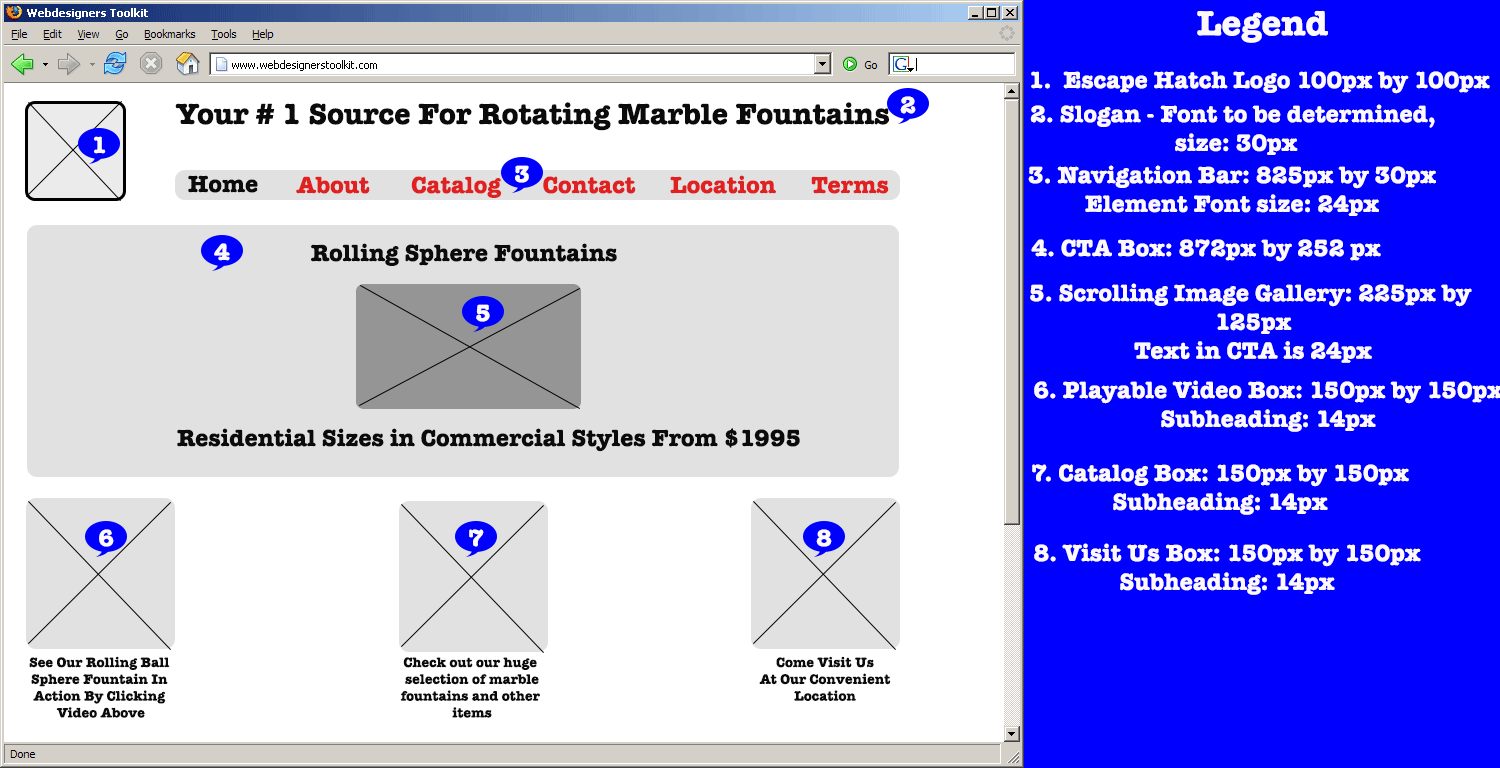
<style>
.page{position:relative;width:1500px;height:768px;background:#ffffff}
.page>*{position:absolute;margin:0}
.t1{font:36px "AmericanTypewriter-Bold";color:#fef9f9}
.t2{font:24px "AmericanTypewriter-Bold";color:#fef9f9}
.t3{font:30px "AmericanTypewriter-Bold";color:#0c0b0b}
.t4{font:24px "AmericanTypewriter-Bold";color:#0c0b0b}
.t5{font:24px "AmericanTypewriter-Bold";color:#e02121}
.t6{font:14px "AmericanTypewriter-Bold";color:#0c0b0b}
</style>
<div class="page">
<p class="t1" style="left:1197px;top:10px;width:131px;height:33px">Legend</p>
<p class="t2" style="left:1031px;top:71px;width:459px;height:23px">1.  Escape Hatch Logo 100px by 100px</p>
<p class="t3" style="left:175px;top:102px;width:715px;height:29px">Your # 1 Source For Rotating Marble Fountains</p>
<p class="t2" style="left:900px;top:96px;width:16px;height:18px">2</p>
<p class="t2" style="left:1030px;top:104px;width:405px;height:51px;text-align:center">2. Slogan - Font to be determined, <br>size: 30px</p>
<p class="t2" style="left:94px;top:136px;width:12px;height:18px">1</p>
<p class="t2" style="left:515px;top:165px;width:14px;height:18px">3</p>
<p class="t2" style="left:1028px;top:165px;width:408px;height:51px;text-align:center">3. Navigation Bar: 825px by 30px<br>Element Font size: 24px</p>
<p class="t4" style="left:188px;top:175px;width:70px;height:18px">Home</p>
<p class="t5" style="left:296px;top:176px;width:74px;height:18px">About</p>
<p class="t5" style="left:411px;top:176px;width:90px;height:22px">Catalog</p>
<p class="t5" style="left:543px;top:176px;width:93px;height:18px">Contact</p>
<p class="t5" style="left:670px;top:175px;width:106px;height:19px">Location</p>
<p class="t5" style="left:811px;top:176px;width:78px;height:18px">Terms</p>
<p class="t2" style="left:214px;top:243px;width:16px;height:18px">4</p>
<p class="t4" style="left:311px;top:243px;width:306px;height:23px">Rolling Sphere Fountains</p>
<p class="t2" style="left:1031px;top:239px;width:350px;height:23px">4. CTA Box: 872px by 252 px</p>
<p class="t2" style="left:1030px;top:283px;width:442px;height:80px;text-align:center">5. Scrolling Image Gallery: 225px by <br>125px<br>Text in CTA is 24px</p>
<p class="t2" style="left:476px;top:304px;width:14px;height:18px">5</p>
<p class="t4" style="left:177px;top:428px;width:623px;height:24px">Residential Sizes in Commercial Styles From $1995</p>
<p class="t2" style="left:1032px;top:464px;width:377px;height:51px;text-align:center">7. Catalog Box: 150px by 150px<br>Subheading: 14px</p>
<p class="t2" style="left:99px;top:529px;width:15px;height:18px">6</p>
<p class="t2" style="left:469px;top:529px;width:15px;height:18px">7</p>
<p class="t2" style="left:816px;top:529px;width:16px;height:18px">8</p>
<p class="t2" style="left:1034px;top:543px;width:387px;height:52px;text-align:center">8. Visit Us Box: 150px by 150px<br>Subheading: 14px</p>
<p class="t6" style="left:29px;top:656px;width:141px;height:62px;text-align:center">See Our Rolling Ball <br>Sphere Fountain In <br>Action By Clicking <br>Video Above</p>
<p class="t6" style="left:400px;top:657px;width:140px;height:61px;text-align:center">Check out our huge <br>selection of marble<br>fountains and other <br>items</p>
<p class="t6" style="left:759px;top:656px;width:132px;height:45px;text-align:center">Come Visit Us<br>At Our Convenient<br>Location</p>
</div>
